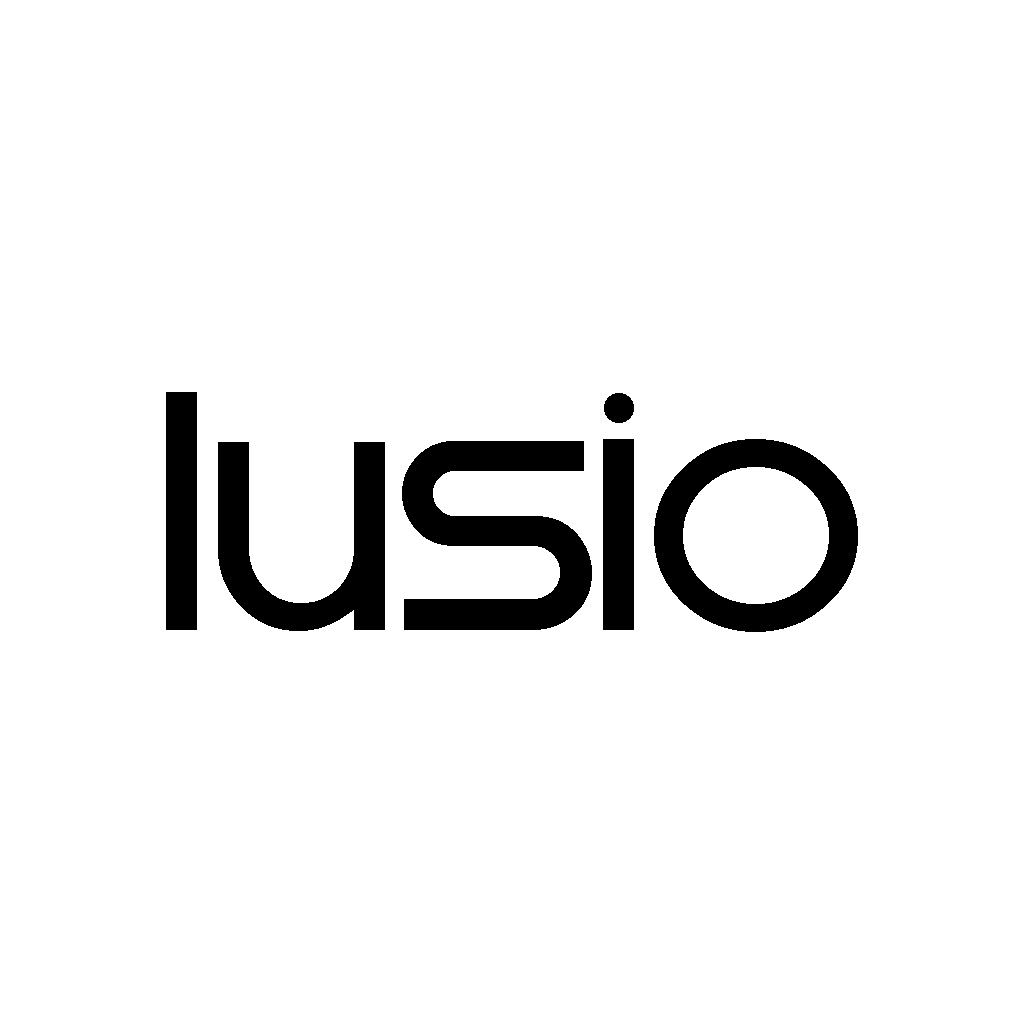
<style>
.page{position:relative;width:1024px;height:1024px;background:#ffffff}
.page>*{position:absolute;margin:0}
.t1{font:300px "Whattimeisit";color:#000000}
</style>
<div class="page">
<p class="t1" style="left:166px;top:392px;width:692px;height:240px">lusio</p>
</div>
